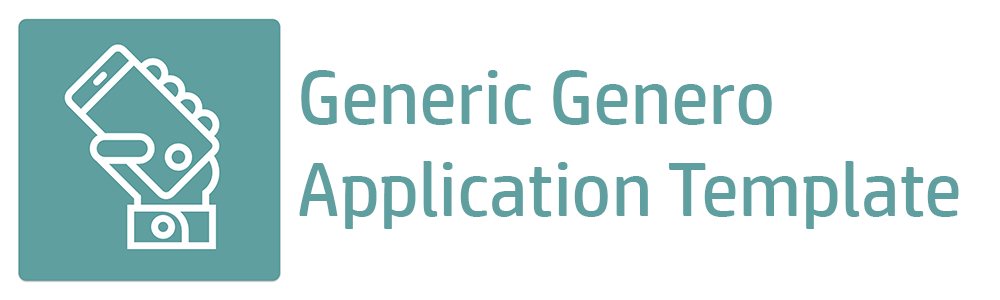
<style>
.page{position:relative;width:1000px;height:300px;background:#ffffff}
.page>*{position:absolute;margin:0}
.t1{font:76.6px "HPSimplified-Regular";color:#5f9f9f}
</style>
<div class="page">
<p class="t1" style="left:299px;top:70px;width:660px;height:159px">Generic Genero<br>Application Template</p>
</div>
